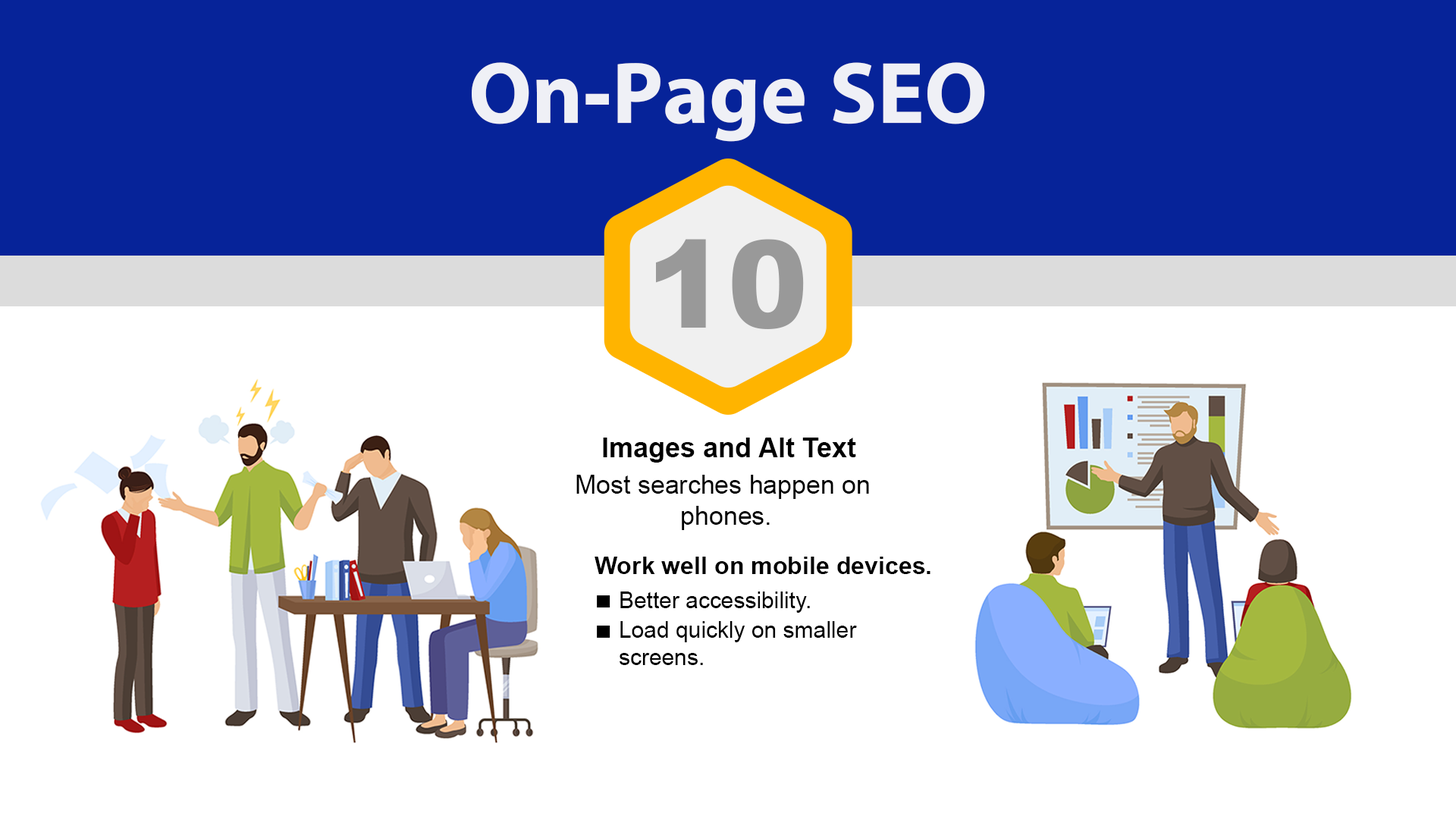
<style>
.page{position:relative;width:1456px;height:819px;background:#ffffff}
.page>*{position:absolute;margin:0}
.t1{font:88px "iKampuchea001_O'Chrov";color:#ffffff}
.t2{font:121px "Arial-Black";color:#999999}
.t3{font:27.3px "Arial-BoldMT";color:#000000}
.t4{font:25.7px "ArialMT";color:#000000}
.t5{font:24.2px "Arial-BoldMT";color:#000000}
.t6{font:22.7px "ArialMT";color:#000000}
</style>
<div class="page">
<p class="t1" style="left:472px;top:62px;width:513px;height:80px;opacity:0.9">On-Page SEO</p>
<p class="t2" style="left:656px;top:239px;width:148px;height:90px">10</p>
<p class="t3" style="left:603px;top:438px;width:253px;height:25px">Images and Alt Text</p>
<p class="t4" style="left:576px;top:475px;width:293px;height:55px;text-align:center">Most searches happen on <br>phones.</p>
<p class="t5" style="left:595px;top:557px;width:335px;height:17px">Work well on mobile devices.</p>
<p class="t6" style="left:620px;top:591px;width:190px;height:22px">Better accessibility.</p>
<p class="t6" style="left:620px;top:621px;width:237px;height:44px">Load quickly on smaller <br>screens.</p>
</div>
